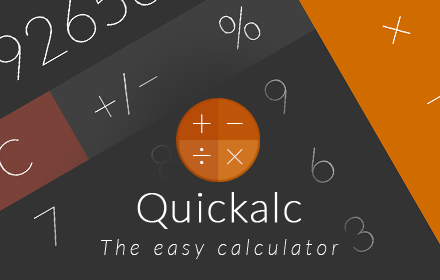
<style>
.page{position:relative;width:440px;height:280px;background:#333333}
.page>*{position:absolute;margin:0}
.t1{font:37.1px "Lato-Thin";letter-spacing:-0.08em;color:#ffffff;text-transform:uppercase}
.t2{font:42px "Lato-Thin";letter-spacing:0.025em;color:#ffffff;font-weight:bold}
.t3{font:21px "Lato-ThinItalic";letter-spacing:0.2em;color:#ffffff}
</style>
<div class="page">
<p class="t1" style="left:193px;top:114px;width:18px;height:19px">+</p>
<p class="t1" style="left:227px;top:123px;width:16px;height:1px">−</p>
<p class="t1" style="left:193px;top:148px;width:18px;height:16px">÷</p>
<p class="t1" style="left:227px;top:149px;width:16px;height:16px">×</p>
<p class="t2" style="left:137px;top:192px;width:165px;height:37px">Quickalc</p>
<p class="t3" style="left:101px;top:239px;width:238px;height:20px">The easy calculator</p>
</div>
